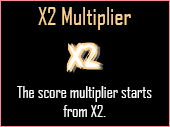
<style>
.page{position:relative;width:170px;height:127px;background:#000000}
.page>*{position:absolute;margin:0}
.t1{font:24px "AgencyFB-Reg";color:#ffd28c}
.t2{font:16px "AgencyFB-Reg";color:#ffffff}
</style>
<div class="page">
<p class="t1" style="left:38px;top:7px;width:93px;height:23px">X2 Multiplier</p>
<p class="t2" style="left:17px;top:86px;width:135px;height:31px;text-align:center">The score multiplier starts from X2.</p>
</div>
